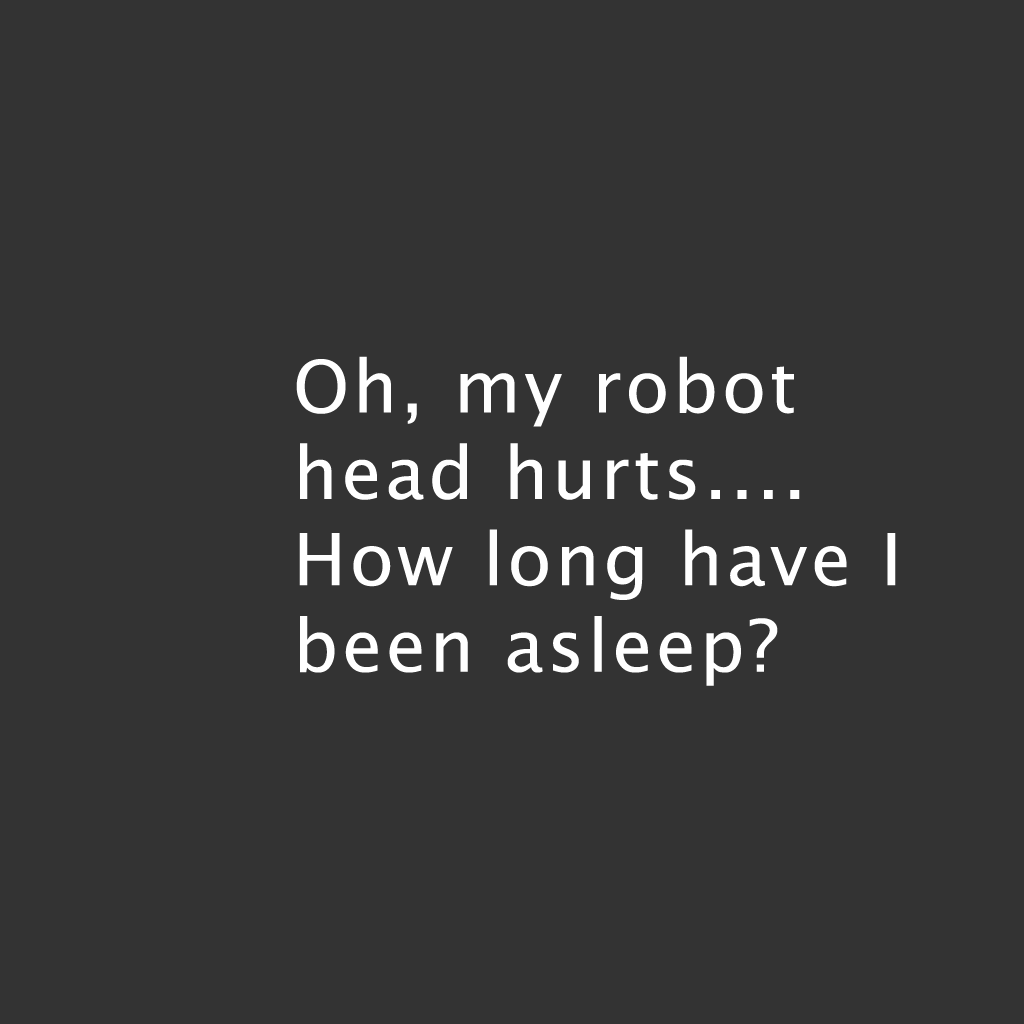
<style>
.page{position:relative;width:1024px;height:1024px;background:#333333}
.page>*{position:absolute;margin:0}
.t1{font:72px "LucidaSans";letter-spacing:0.05em;color:#ffffff}
</style>
<div class="page">
<p class="t1" style="left:296px;top:356px;width:600px;height:330px">Oh, my robot<br>head hurts....<br>How long have I<br>been asleep?</p>
</div>
